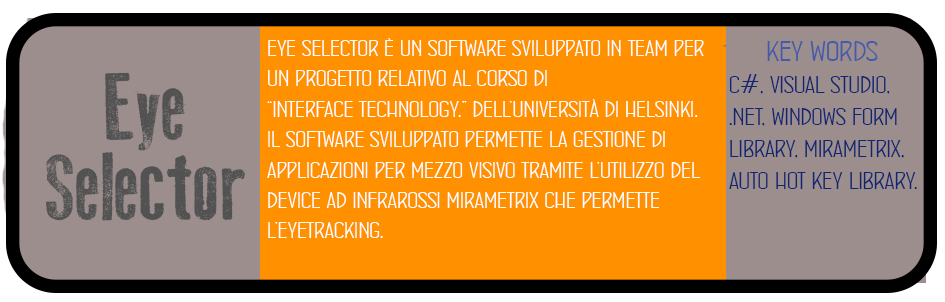
<style>
.page{position:relative;width:945px;height:302px;background:#ff9000}
.page>*{position:absolute;margin:0}
.t1{font:25.3px "ConcursoItalianBTNWide";color:#ffffff}
.t2{font:26.7px "ConcursoItalianBTNWide";color:#112672}
.t3{font:32px "ConcursoItalianBTNWide";color:#455baa}
.t4{font:93.3px "OldPress";color:#525252}
.t5{font:80px "ConcursoItalianBTNWide";color:#525252}
</style>
<div class="page">
<p class="t1" style="left:267px;top:38px;width:437px;height:200px">eye selector è un software sviluppato in team per<br>un progetto relativo al corso di <br>“interface technology.” dell’università di helsinki. <br>il software sviluppato permette la gestione di <br>applicazioni per mezzo visivo tramite l’utilizzo del <br>device ad infrarossi mirametrix che permette<br>l’eyetracking.</p>
<p class="t2" style="left:729px;top:41px;width:188px;height:148px"><span class="t3">     key words<br></span>c#, visual studio,<br>.net, windows form <br>library, mirametrix,<br>auto hot key library.</p>
<p class="t4" style="left:105px;top:72px;width:81px;height:79px"><span class="t5"> </span>Eye</p>
<p class="t4" style="left:46px;top:152px;width:199px;height:69px">Selector</p>
</div>
